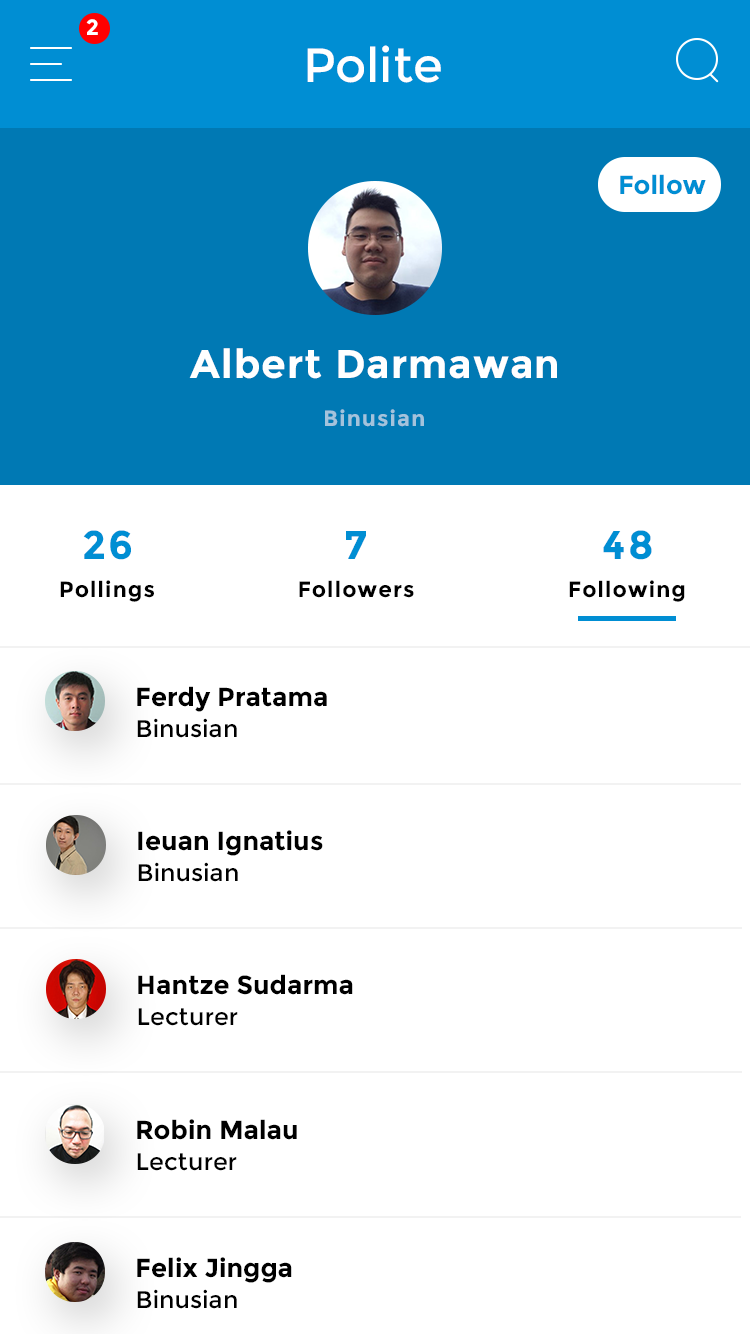
<style>
.page{position:relative;width:750px;height:1334px;background:#ffffff}
.page>*{position:absolute;margin:0}
.t1{font:22px "Montserrat-Bold";letter-spacing:0.05em;color:#ffffff}
.t2{font:48px "Montserrat-Regular";color:#ffffff}
.t3{font:26px "Montserrat-Bold";color:#008ed3}
.t4{font:40px "Montserrat-Bold";letter-spacing:0.024em;color:#ffffff}
.t5{font:22px "Montserrat-Bold";letter-spacing:0.05em;color:#a3c3dc}
.t6{font:40px "Montserrat-Bold";letter-spacing:0.05em;color:#008ed3}
.t7{font:22px "Montserrat-Bold";letter-spacing:0.05em;color:#000000}
.t8{font:26px "Montserrat-Bold";color:#000000}
.t9{font:12px "Montserrat-Regular";color:#000000}
</style>
<div class="page">
<p class="t1" style="left:86px;top:19px;width:12px;height:16px">2</p>
<p class="t2" style="left:307px;top:45px;width:134px;height:38px">Polite</p>
<p class="t3" style="left:620px;top:174px;width:86px;height:21px">Follow</p>
<p class="t4" style="left:189px;top:348px;width:368px;height:31px">Albert Darmawan</p>
<p class="t5" style="left:325px;top:409px;width:99px;height:18px">Binusian</p>
<p class="t6" style="left:83px;top:530px;width:48px;height:30px">26</p>
<p class="t6" style="left:346px;top:531px;width:20px;height:28px">7</p>
<p class="t6" style="left:603px;top:530px;width:49px;height:30px">48</p>
<p class="t7" style="left:60px;top:580px;width:94px;height:22px">Pollings</p>
<p class="t7" style="left:299px;top:580px;width:115px;height:18px">Followers</p>
<p class="t7" style="left:569px;top:580px;width:116px;height:22px">Following</p>
<p class="t8" style="left:137px;top:686px;width:190px;height:26px">Ferdy Pratama</p>
<p class="t9" style="left:137px;top:718px;width:100px;height:20px">Binusian</p>
<p class="t8" style="left:138px;top:830px;width:185px;height:26px">Ieuan Ignatius</p>
<p class="t9" style="left:138px;top:862px;width:100px;height:20px">Binusian</p>
<p class="t8" style="left:138px;top:974px;width:215px;height:21px">Hantze Sudarma</p>
<p class="t9" style="left:138px;top:1008px;width:100px;height:18px">Lecturer</p>
<p class="t8" style="left:137px;top:1119px;width:160px;height:21px">Robin Malau</p>
<p class="t9" style="left:137px;top:1153px;width:100px;height:18px">Lecturer</p>
<p class="t8" style="left:137px;top:1257px;width:155px;height:26px">Felix Jingga</p>
<p class="t9" style="left:137px;top:1289px;width:100px;height:20px">Binusian</p>
</div>
